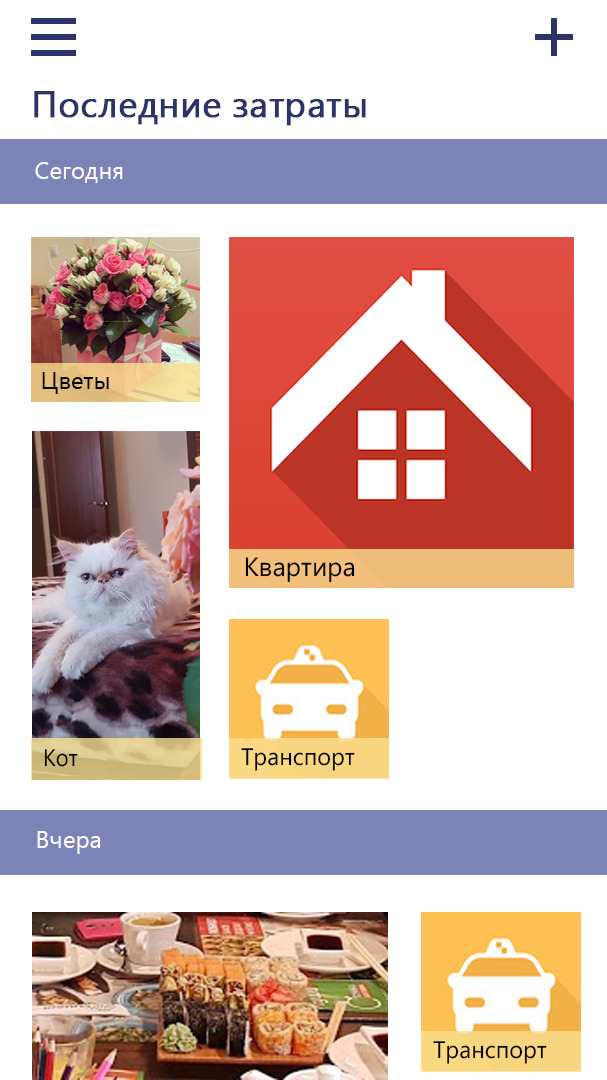
<style>
.page{position:relative;width:607px;height:1080px;background:#ffffff}
.page>*{position:absolute;margin:0}
.t1{font:36px "YuGothicUI-Regular";color:#2b3368;font-weight:bold}
.t2{font:24px "YuGothicUI-Regular";color:#ffffff}
.t3{font:24px "YuGothicUI-Regular";color:#000000}
.t4{font:26.3px "YuGothicUI-Regular";color:#010000}
.t5{font:24px "YuGothicUI-Regular";color:#000001;scale:0.92 1}
</style>
<div class="page">
<p class="t1" style="left:34px;top:91px;width:332px;height:35px">Последние затраты</p>
<p class="t2" style="left:35px;top:162px;width:88px;height:21px">Сегодня</p>
<p class="t3" style="left:42px;top:372px;width:67px;height:22px">Цветы</p>
<p class="t4" style="left:245px;top:557px;width:110px;height:26px">Квартира</p>
<p class="t5" style="left:44px;top:749px;width:34px;height:18px">Кот</p>
<p class="t3" style="left:241px;top:748px;width:114px;height:23px">Транспорт</p>
<p class="t2" style="left:37px;top:831px;width:64px;height:23px">Вчера</p>
<p class="t3" style="left:433px;top:1041px;width:114px;height:23px">Транспорт</p>
</div>
